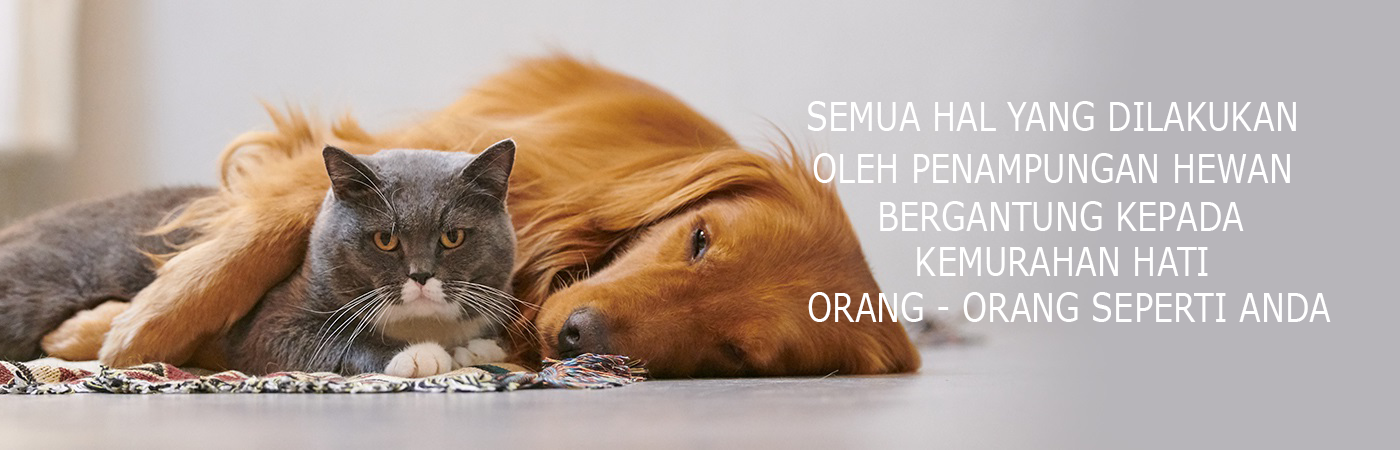
<style>
.page{position:relative;width:1400px;height:450px}
.page>*{position:absolute;margin:0}
.t1{font:40px "Verdana";color:#ffffff;text-transform:uppercase;scale:0.8 1}
</style>
<div class="page">
<p class="t1" style="left:808px;top:101px;width:488px;height:30px">Semua hal Yang Dilakukan</p>
<p class="t1" style="left:813px;top:153px;width:477px;height:30px">oleh Penampungan Hewan</p>
<p class="t1" style="left:880px;top:201px;width:364px;height:30px">bergantung Kepada</p>
<p class="t1" style="left:917px;top:247px;width:291px;height:29px">Kemurahan hati</p>
<p class="t1" style="left:808px;top:292px;width:523px;height:30px">Orang - orang seperti anda</p>
</div>
